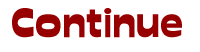
<style>
.page{position:relative;width:200px;height:52px;background:#ffffff}
.page>*{position:absolute;margin:0}
.t1{font:40px "Glockenspiel";color:#970000}
</style>
<div class="page">
<p class="t1" style="left:12px;top:8px;width:170px;height:30px">Continue</p>
</div>
